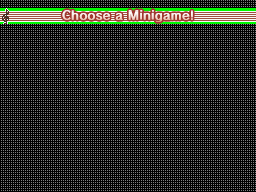
<style>
.page{position:relative;width:256px;height:192px;background:#000000}
.page>*{position:absolute;margin:0}
.t1{font:12px "RodinProN-DB";letter-spacing:0.05em}
</style>
<div class="page">
<p class="t1" style="left:62px;top:10px;width:131px;height:12px">Choose a Minigame!</p>
</div>
